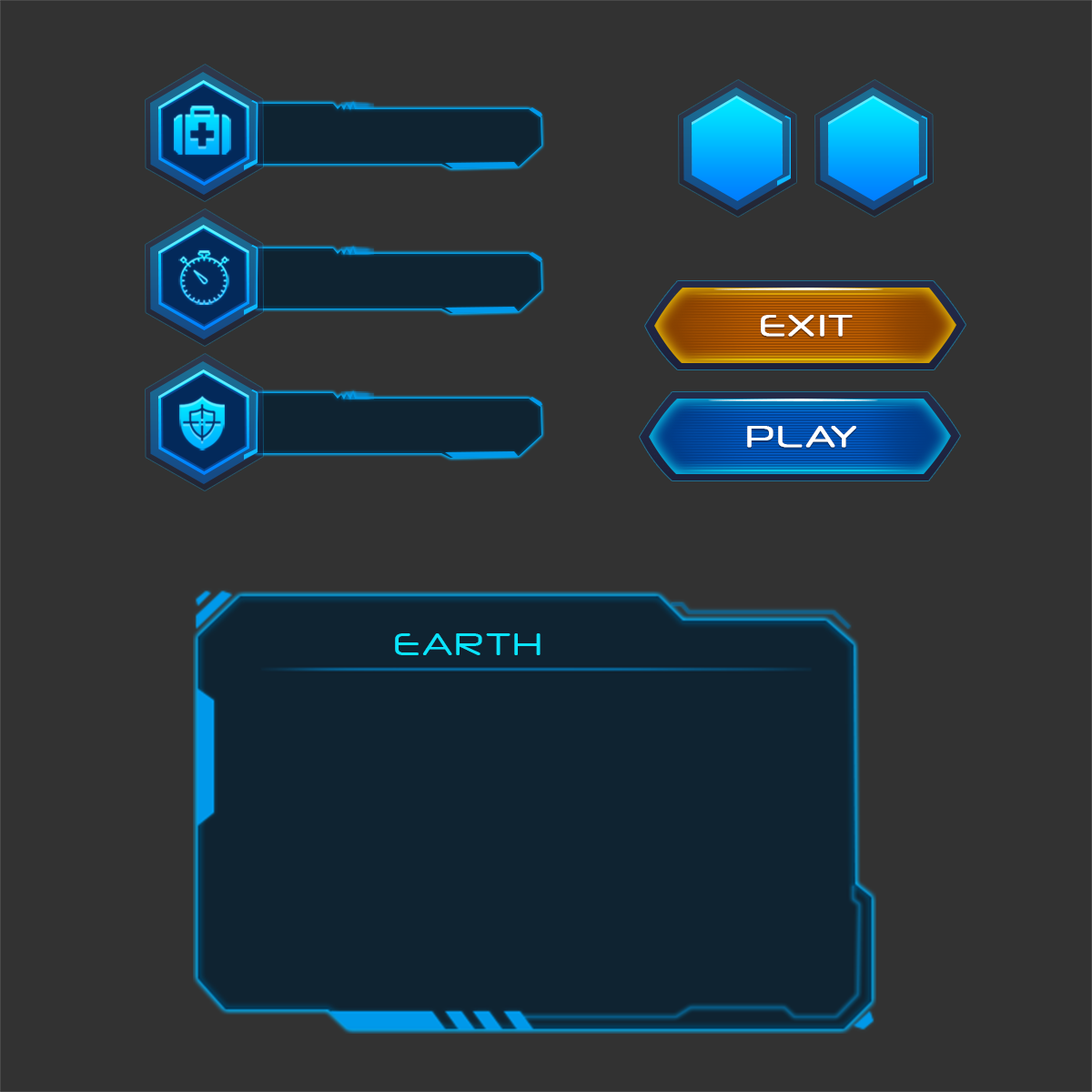
<style>
.page{position:relative;width:1092px;height:1092px;background:#323232}
.page>*{position:absolute;margin:0}
.t1{font:30.3px "NeuropolXRg-Regular";color:#ffffff;text-transform:uppercase;font-weight:bold}
.t2{font:31.4px "NeuropolXRg-Regular";color:#0ae4fe;text-transform:uppercase}
</style>
<div class="page">
<p class="t1" style="left:761px;top:315px;width:92px;height:22px">exit</p>
<p class="t1" style="left:747px;top:426px;width:109px;height:22px">play</p>
<p class="t2" style="left:395px;top:633px;width:146px;height:22px">earth</p>
</div>
